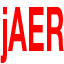
<style>
.page{position:relative;width:64px;height:64px;background:#ffffff}
.page>*{position:absolute;margin:0}
.t1{font:61.1px "HelveticaNeueLTStd-Bd";color:#ff0000;scale:0.45 1}
</style>
<div class="page">
<p class="t1" style="left:0px;top:7px;width:64px;height:56px">jAER</p>
</div>
